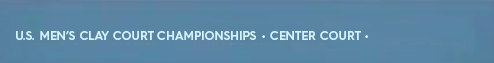
<style>
.page{position:relative;width:494px;height:63px}
.page>*{position:absolute;margin:0}
.t1{font:12px "HurmeGeometricSans4-SemiBold";color:#d3f3fd}
</style>
<div class="page">
<p class="t1" style="left:16px;top:31px;width:240px;height:9px">U.S. MEN’S CLAY COURT CHAMPIONSHIPS</p>
<p class="t1" style="left:262px;top:31px;width:106px;height:9px">• CENTER COURT •</p>
</div>
